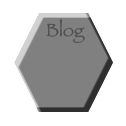
<style>
.page{position:relative;width:126px;height:126px;background:#ffffff}
.page>*{position:absolute;margin:0}
.t1{font:18px "Papyrus";color:#4f4f4f}
</style>
<div class="page">
<p class="t1" style="left:46px;top:19px;width:39px;height:24px">Blog</p>
</div>
